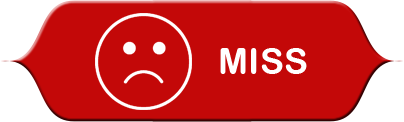
<style>
.page{position:relative;width:404px;height:122px;background:#c30808}
.page>*{position:absolute;margin:0}
.t1{font:36px "ArialRoundedMTBold";color:#ffffff}
</style>
<div class="page">
<p class="t1" style="left:220px;top:48px;width:87px;height:26px">MISS</p>
</div>
